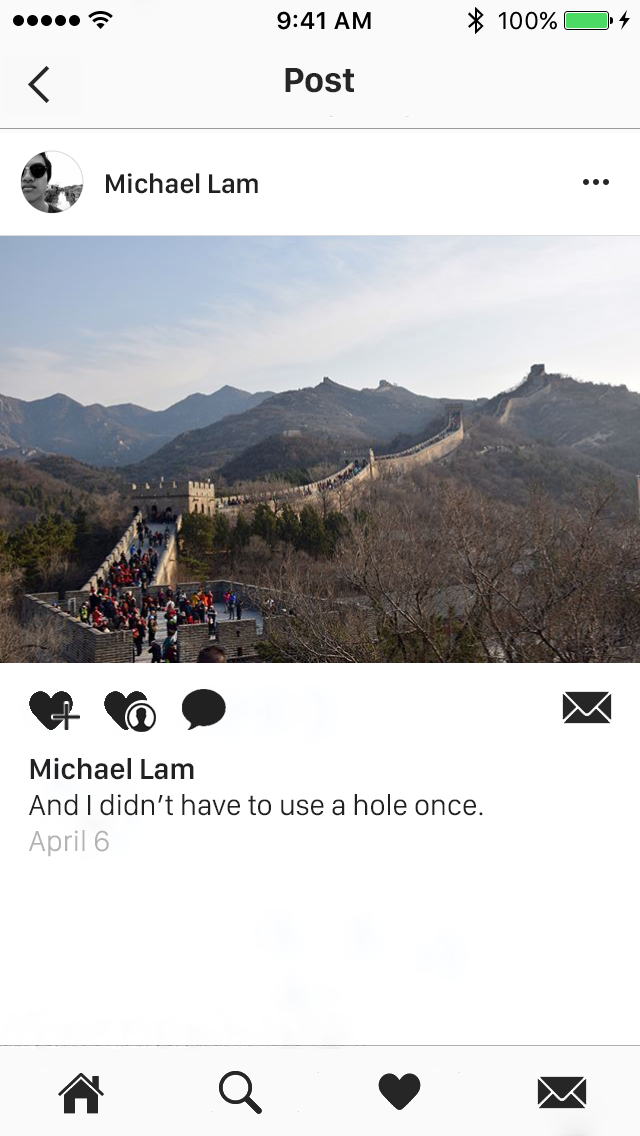
<style>
.page{position:relative;width:640px;height:1136px;background:#ffffff}
.page>*{position:absolute;margin:0}
.t1{font:36px "SanFranciscoDisplay-Bold";color:#262626}
.t2{font:28px "SanFranciscoDisplay-Semibold";color:#212121}
.t3{font:30px "SanFranciscoDisplay-Regular";color:#212121}
.t4{font:30px "SanFranciscoDisplay-Semibold";color:#212121}
.t5{font:30px "SanFranciscoDisplay-Regular";color:#b3b3b3}
</style>
<div class="page">
<p class="t1" style="left:285px;top:68px;width:69px;height:25px">Post</p>
<p class="t2" style="left:106px;top:173px;width:152px;height:21px">Michael Lam</p>
<p class="t3" style="left:29px;top:757px;width:454px;height:100px"><span class="t4">Michael Lam<br></span>And I didn’t have to use a hole once.<br><span class="t5">April 6</span></p>
</div>
